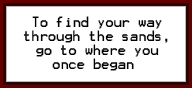
<style>
.page{position:relative;width:192px;height:88px;background:#ffffff}
.page>*{position:absolute;margin:0}
.t1{font:11.7px "Terminal";color:#000000;scale:0.93 1}
</style>
<div class="page">
<p class="t1" style="left:23px;top:16px;width:145px;height:55px;text-align:center">To find your way<br>through the sands,<br>go to where you<br>once began</p>
</div>
